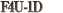
<style>
.page{position:relative;width:63px;height:13px;background:#ffffff}
.page>*{position:absolute;margin:0}
.t1{font:15px "RyuminPro-ExBold";letter-spacing:-0.06em;color:#4a3f32;font-weight:bold;scale:0.9 1}
</style>
<div class="page">
<p class="t1" style="left:0px;top:1px;width:43px;height:12px">F4U-1D</p>
</div>
